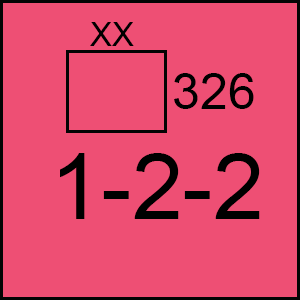
<style>
.page{position:relative;width:300px;height:300px;background:#ee4f74}
.page>*{position:absolute;margin:0}
.t1{font:33.3px "ArialMT";color:#000000}
.t2{font:50px "ArialMT";color:#000000}
.t3{font:91.7px "ArialMT";color:#000000}
</style>
<div class="page">
<p class="t1" style="left:90px;top:22px;width:44px;height:24px">XX</p>
<p class="t2" style="left:174px;top:73px;width:80px;height:36px">326</p>
<p class="t3" style="left:60px;top:153px;width:200px;height:66px">1-2-2</p>
</div>
